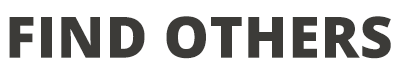
<style>
.page{position:relative;width:400px;height:74px;background:#ffffff}
.page>*{position:absolute;margin:0}
.t1{font:57.3px "OpenSans-ExtraBold";letter-spacing:0.01em;color:#3c3b38;text-transform:uppercase}
</style>
<div class="page">
<p class="t1" style="left:9px;top:16px;width:382px;height:43px">find others</p>
</div>
